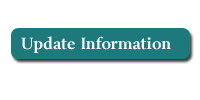
<style>
.page{position:relative;width:200px;height:100px;background:#ffffff}
.page>*{position:absolute;margin:0}
.t1{font:15px "Byington-Bold";color:#faf9f9}
</style>
<div class="page">
<p class="t1" style="left:21px;top:36px;width:150px;height:17px">Update Information</p>
</div>
